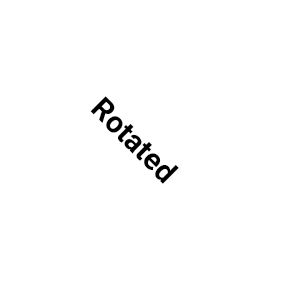
<style>
.page{position:relative;width:300px;height:300px;background:#ffffff}
.page>*{position:absolute;margin:0}
.t1{font:30px "Roboto-Bold";color:#000000}
</style>
<div class="page">
<p class="t1" style="left:90px;top:96px;width:89px;height:88px;rotate:45deg">Rotated</p>
</div>
